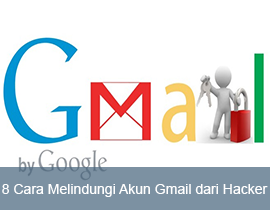
<style>
.page{position:relative;width:270px;height:210px;background:#ffffff}
.page>*{position:absolute;margin:0}
.t1{font:14.3px "ArialMT";color:#ffffff}
</style>
<div class="page">
<p class="t1" style="left:2px;top:184px;width:266px;height:13px">8 Cara Melindungi Akun Gmail dari Hacker</p>
</div>
